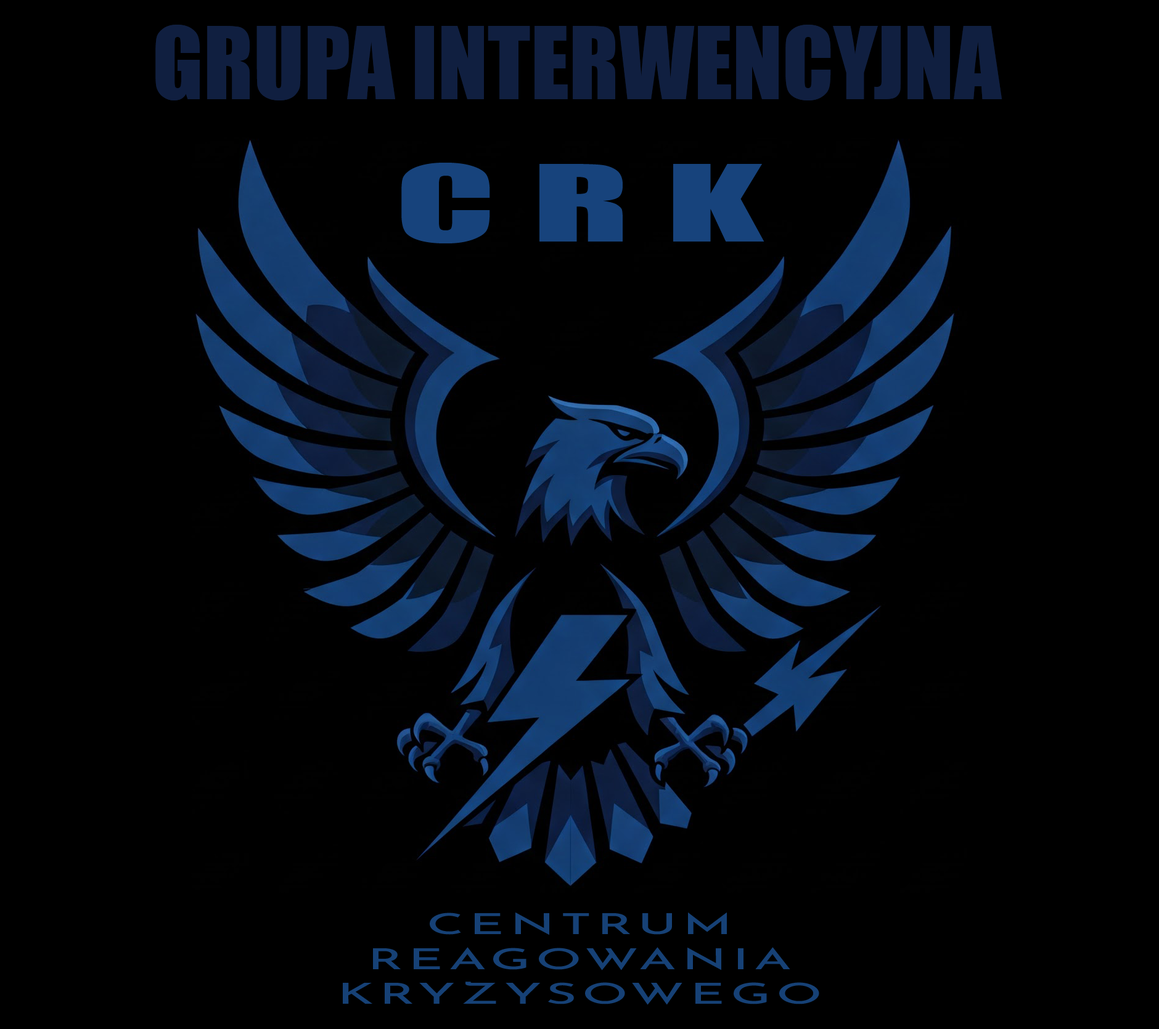
<style>
.page{position:relative;width:1159px;height:1029px;background:#000000}
.page>*{position:absolute;margin:0}
.t1{font:92.4px "Impact";color:#101f40}
.t2{font:98px "Impact";letter-spacing:0.2em;color:#17437c;scale:1.85 1}
.t3{font:29px "ReemKufi-Regular";letter-spacing:0.1em;color:#164176;scale:1.85 1}
</style>
<div class="page">
<p class="t1" style="left:155px;top:25px;width:846px;height:75px">GRUPA INTERWENCYJNA</p>
<p class="t2" style="left:401px;top:163px;width:363px;height:80px">CRK</p>
<p class="t3" style="left:343px;top:912px;width:476px;height:93px;text-align:center">CENTRUM <br>REAGOWANIA <br>KRYZYSOWEGO</p>
</div>
